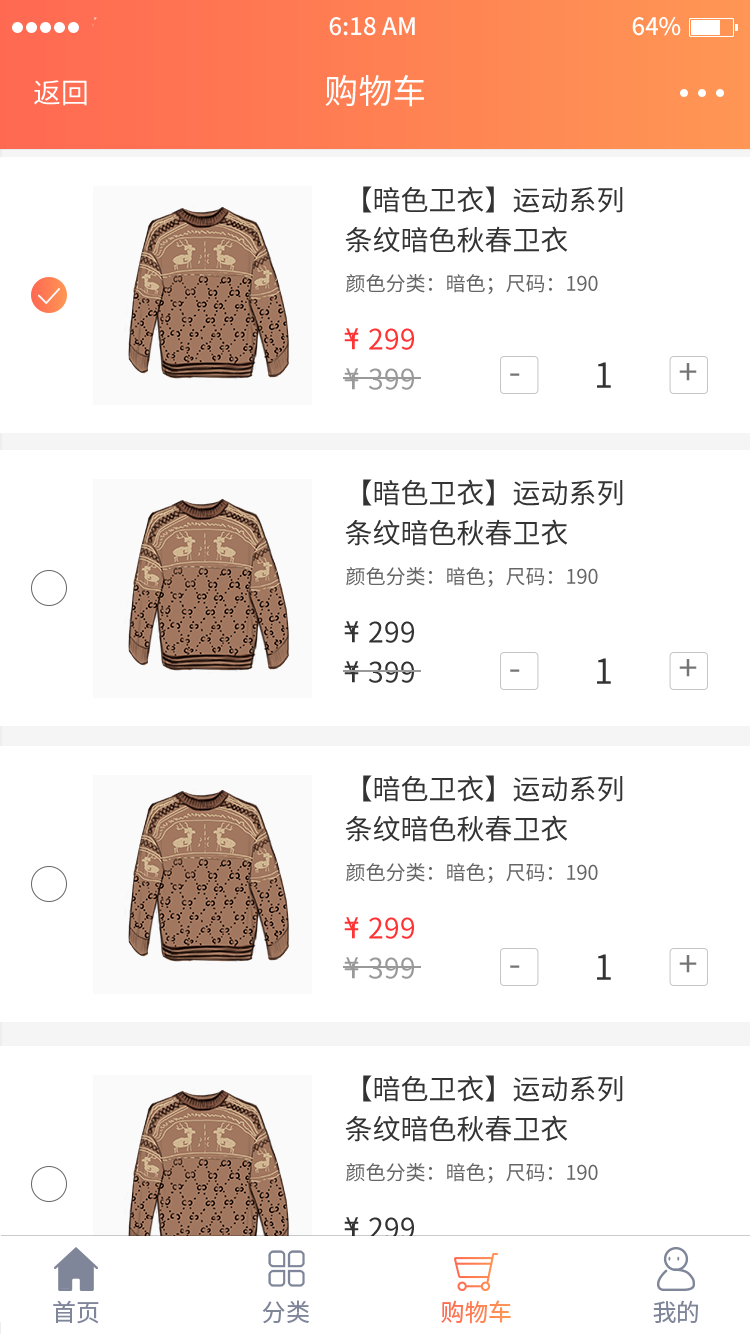
<style>
.page{position:relative;width:750px;height:1334px;background:#ffffff}
.page>*{position:absolute;margin:0}
.t1{font:34px "NotoSansHans-Regular";color:#ffffff}
.t2{font:28px "NotoSansHans-Regular";color:#ffffff}
.t3{font:28px/40px "NotoSansHans-Regular";color:#333333}
.t4{font:20px "NotoSansHans-Regular";color:#666666}
.t5{font:27.9px "NotoSansHans-Regular";color:#ff3333}
.t6{font:19.6px "NotoSansHans-Regular";color:#ff3333;scale:1.43 1}
.t7{font:34.3px "NotoSansHans-Regular";color:#333333}
.t8{font:34.3px "NotoSansHans-Regular";color:#757575}
.t9{font:27.9px "NotoSansHans-Regular";color:#999999}
.t10{font:19.6px "NotoSansHans-Regular";color:#999999;scale:1.43 1}
.t11{font:27.9px "NotoSansHans-Regular";color:#333333}
.t12{font:19.6px "NotoSansHans-Regular";color:#333333;scale:1.43 1}
.t13{font:24px "NotoSansHans-Regular";color:#7f8699}
.t14{font:24px "NotoSansHans-Regular";color:#ff8253}
</style>
<div class="page">
<p class="t1" style="left:325px;top:75px;width:99px;height:32px">购物车</p>
<p class="t2" style="left:34px;top:80px;width:53px;height:26px">返回</p>
<p class="t3" style="left:345px;top:186px;width:278px;height:67px">【暗色卫衣】运动系列<br>条纹暗色秋春卫衣</p>
<p class="t4" style="left:346px;top:274px;width:252px;height:21px">颜色分类：暗色；尺码：190</p>
<p class="t5" style="left:346px;top:328px;width:12px;height:13px;rotate:180deg">^</p>
<p class="t5" style="left:369px;top:328px;width:45px;height:22px">299</p>
<p class="t5" style="left:344px;top:332px;width:15px;height:10px">=</p>
<p class="t6" style="left:352px;top:335px;width:3px;height:15px">I</p>
<p class="t7" style="left:597px;top:362px;width:14px;height:26px">1</p>
<p class="t8" style="left:679px;top:363px;width:18px;height:18px">+</p>
<p class="t9" style="left:344px;top:372px;width:15px;height:10px">=</p>
<p class="t9" style="left:346px;top:368px;width:12px;height:13px;rotate:180deg">^</p>
<p class="t10" style="left:352px;top:375px;width:3px;height:15px">I</p>
<p class="t9" style="left:368px;top:368px;width:46px;height:22px">399</p>
<p class="t8" style="left:510px;top:373px;width:10px;height:3px">-</p>
<p class="t3" style="left:345px;top:479px;width:278px;height:67px">【暗色卫衣】运动系列<br>条纹暗色秋春卫衣</p>
<p class="t4" style="left:346px;top:567px;width:252px;height:21px">颜色分类：暗色；尺码：190</p>
<p class="t11" style="left:344px;top:625px;width:15px;height:10px">=</p>
<p class="t11" style="left:346px;top:621px;width:12px;height:13px;rotate:180deg">^</p>
<p class="t12" style="left:352px;top:628px;width:3px;height:15px">I</p>
<p class="t11" style="left:369px;top:621px;width:45px;height:22px">299</p>
<p class="t11" style="left:344px;top:665px;width:15px;height:10px">=</p>
<p class="t11" style="left:346px;top:661px;width:12px;height:13px;rotate:180deg">^</p>
<p class="t11" style="left:368px;top:661px;width:46px;height:22px">399</p>
<p class="t7" style="left:597px;top:658px;width:14px;height:26px">1</p>
<p class="t8" style="left:679px;top:659px;width:18px;height:18px">+</p>
<p class="t12" style="left:352px;top:668px;width:3px;height:15px">I</p>
<p class="t8" style="left:510px;top:669px;width:10px;height:3px">-</p>
<p class="t3" style="left:345px;top:775px;width:278px;height:67px">【暗色卫衣】运动系列<br>条纹暗色秋春卫衣</p>
<p class="t4" style="left:346px;top:863px;width:252px;height:21px">颜色分类：暗色；尺码：190</p>
<p class="t5" style="left:346px;top:917px;width:12px;height:13px;rotate:180deg">^</p>
<p class="t5" style="left:369px;top:917px;width:45px;height:22px">299</p>
<p class="t5" style="left:344px;top:921px;width:15px;height:10px">=</p>
<p class="t6" style="left:352px;top:924px;width:3px;height:15px">I</p>
<p class="t9" style="left:344px;top:961px;width:15px;height:10px">=</p>
<p class="t9" style="left:346px;top:957px;width:12px;height:13px;rotate:180deg">^</p>
<p class="t10" style="left:352px;top:964px;width:3px;height:15px">I</p>
<p class="t9" style="left:368px;top:957px;width:46px;height:22px">399</p>
<p class="t8" style="left:510px;top:965px;width:10px;height:3px">-</p>
<p class="t7" style="left:597px;top:954px;width:14px;height:26px">1</p>
<p class="t8" style="left:679px;top:955px;width:18px;height:18px">+</p>
<p class="t3" style="left:345px;top:1075px;width:278px;height:67px">【暗色卫衣】运动系列<br>条纹暗色秋春卫衣</p>
<p class="t4" style="left:346px;top:1163px;width:252px;height:21px">颜色分类：暗色；尺码：190</p>
<p class="t11" style="left:346px;top:1217px;width:12px;height:13px;rotate:180deg">^</p>
<p class="t11" style="left:369px;top:1217px;width:45px;height:22px">299</p>
<p class="t11" style="left:344px;top:1221px;width:15px;height:10px">=</p>
<p class="t12" style="left:352px;top:1224px;width:3px;height:15px">I</p>
<p class="t13" style="left:53px;top:1300px;width:46px;height:24px">首页</p>
<p class="t13" style="left:262px;top:1300px;width:47px;height:24px">分类</p>
<p class="t14" style="left:441px;top:1300px;width:70px;height:24px">购物车</p>
<p class="t13" style="left:653px;top:1300px;width:45px;height:23px">我的</p>
</div>
